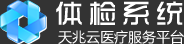
<style>
.page{position:relative;width:184px;height:44px;background:#333333}
.page>*{position:absolute;margin:0}
.t1{font:28px "TRENDS";letter-spacing:0.2em;color:#ffffff}
.t2{font:14px "MicrosoftYaHei";color:#ffffff}
</style>
<div class="page">
<p class="t1" style="left:56px;top:1px;width:127px;height:24px">体检系统</p>
<p class="t2" style="left:58px;top:30px;width:126px;height:14px">天兆云医疗服务平台</p>
</div>
